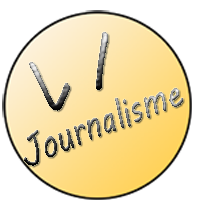
<style>
.page{position:relative;width:200px;height:200px;background:#ffffff}
.page>*{position:absolute;margin:0}
.t1{font:79.6px "MVBoli";scale:0.8 1}
.t2{font:79.6px "MVBoli";scale:0.68 1}
.t3{font:40px "MVBoli";scale:0.78 1}
</style>
<div class="page">
<p class="t1" style="left:96px;top:32px;width:12px;height:58px;rotate:1deg">I</p>
<p class="t2" style="left:29px;top:62px;width:41px;height:49px;rotate:-37deg">L</p>
<p class="t3" style="left:24px;top:88px;width:159px;height:78px;rotate:-22deg">Journalisme</p>
</div>
